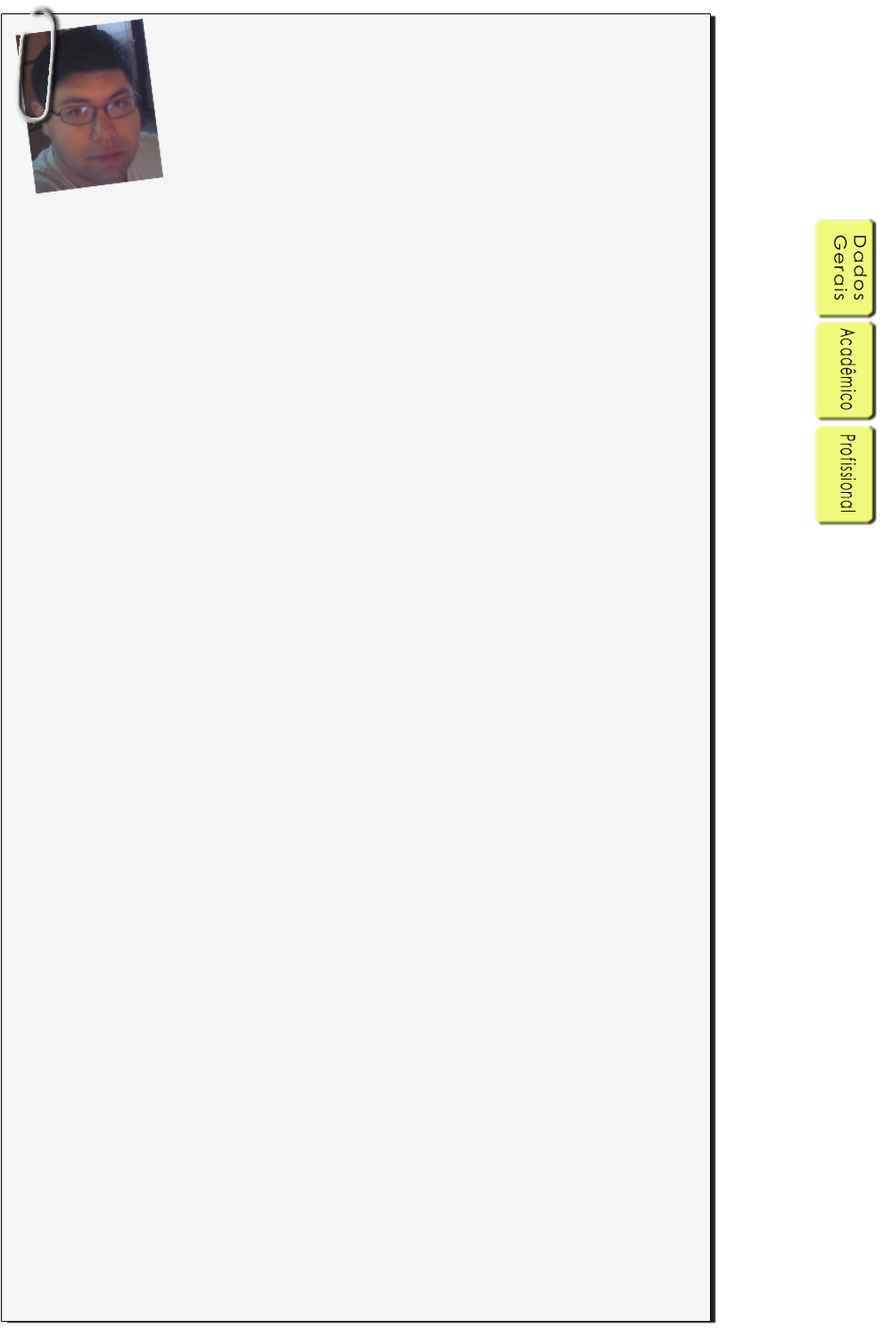
<style>
.page{position:relative;width:892px;height:1337px;background:#f6f5f5}
.page>*{position:absolute;margin:0}
.t1{font:16.4px "CenturyGothic";letter-spacing:0.1em;color:#000000;scale:1.12 1}
.t2{font:20px "CenturyGothic";letter-spacing:0.1em;color:#000000;scale:0.62 1}
</style>
<div class="page">
<p class="t1" style="left:834px;top:235px;width:33px;height:65px;text-align:center;rotate:90deg">Dados<br>Gerais</p>
<p class="t2" style="left:840px;top:328px;width:16px;height:82px;rotate:90deg">Acadêmico</p>
<p class="t2" style="left:840px;top:435px;width:16px;height:77px;rotate:90deg">Profissional</p>
</div>
